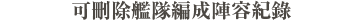
<style>
.page{position:relative;width:363px;height:21px;background:#ffffff}
.page>*{position:absolute;margin:0}
.t1{font:20px "RyuminPr6N-ExBold";color:#4c4843}
</style>
<div class="page">
<p class="t1" style="left:72px;top:0px;width:219px;height:20px">可刪除艦隊編成陣容紀錄</p>
</div>
